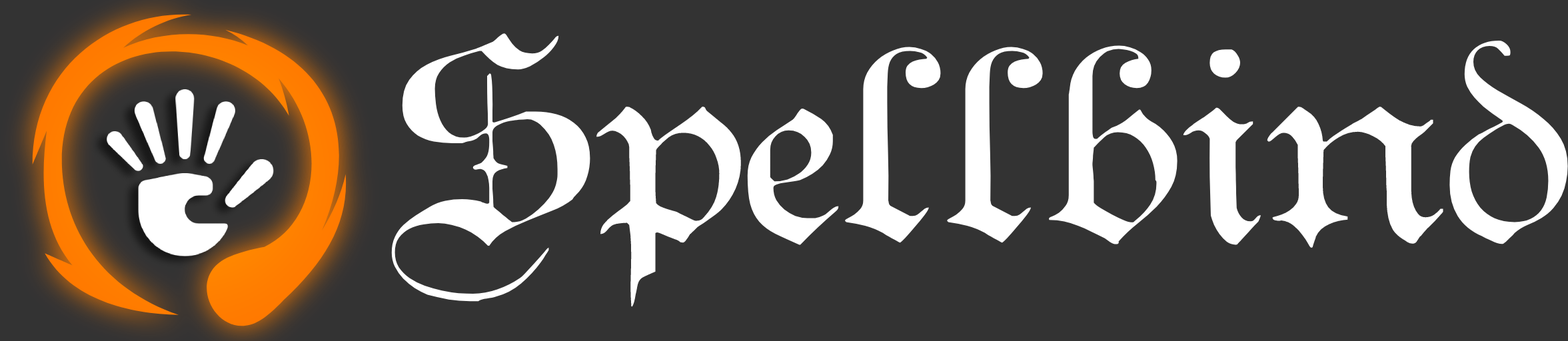
<style>
.page{position:relative;width:1568px;height:341px;background:#333333}
.page>*{position:absolute;margin:0}
.t1{font:266.6px "TeutonicNo1-DemiBold";color:#ffffff}
</style>
<div class="page">
<p class="t1" style="left:391px;top:33px;width:1177px;height:274px">Spellbind</p>
</div>
